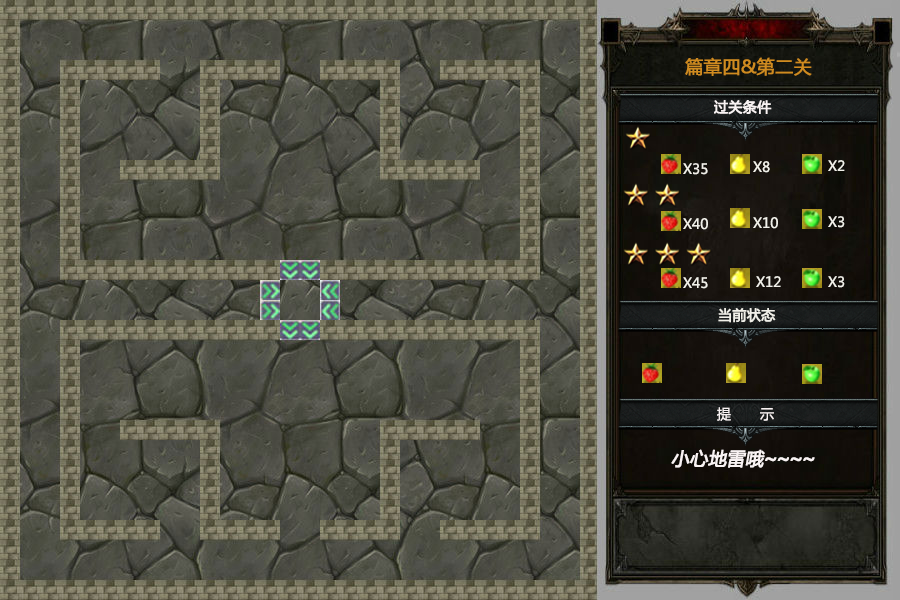
<style>
.page{position:relative;width:900px;height:600px}
.page>*{position:absolute;margin:0}
.t1{font:18px "MicrosoftYaHei";color:#cf8b20;font-weight:bold}
.t2{font:14px "MicrosoftYaHei";color:#f9f3f3;font-weight:bold}
.t3{font:14px "MicrosoftYaHei";color:#f1f0e9}
.t4{font:14px "MicrosoftYaHei";color:#f1f0e9;font-weight:bold}
.t5{font:14px "MicrosoftYaHei";color:#f9f3f3}
.t6{font:18px "MicrosoftYaHei";color:#f9f3f3;font-weight:bold;font-style:italic}
.t7{font:18px "AdobeHeitiStd-Regular";color:#f9f3f3;font-weight:bold;font-style:italic}
</style>
<div class="page">
<p class="t1" style="left:685px;top:57px;width:127px;height:19px">篇章四&amp;第二关</p>
<p class="t2" style="left:714px;top:100px;width:58px;height:15px">过关条件</p>
<p class="t3" style="left:753px;top:161px;width:17px;height:12px">X8</p>
<p class="t3" style="left:828px;top:160px;width:17px;height:11px">X2</p>
<p class="t3" style="left:683px;top:163px;width:25px;height:12px">X35</p>
<p class="t3" style="left:683px;top:218px;width:25px;height:12px">X40</p>
<p class="t3" style="left:753px;top:217px;width:25px;height:12px">X10</p>
<p class="t3" style="left:828px;top:216px;width:17px;height:12px">X3</p>
<p class="t3" style="left:683px;top:277px;width:25px;height:12px">X45</p>
<p class="t3" style="left:756px;top:276px;width:25px;height:11px">X12</p>
<p class="t3" style="left:828px;top:276px;width:17px;height:12px">X3</p>
<p class="t4" style="left:718px;top:308px;width:58px;height:15px">当前状态</p>
<p class="t5" style="left:717px;top:407px;width:57px;height:14px">提       示</p>
<p class="t6" style="left:671px;top:449px;width:144px;height:19px">小心地雷哦<span class="t7">~~~~</span></p>
</div>
